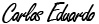
<style>
.page{position:relative;width:99px;height:24px;background:#ffffff}
.page>*{position:absolute;margin:0}
.t1{font:28.6px "FreestyleScript-Regular";letter-spacing:-0.05em;color:#000000}
</style>
<div class="page">
<p class="t1" style="left:2px;top:2px;width:93px;height:21px">Carlos Eduardo</p>
</div>
